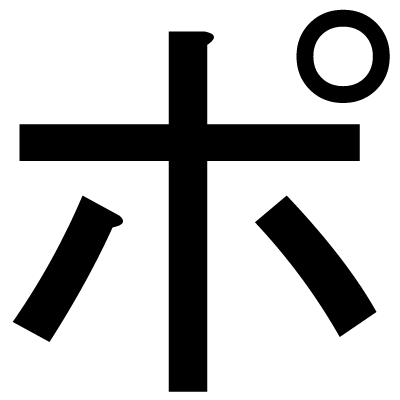
<style>
.page{position:relative;width:400px;height:400px;background:#ffffff}
.page>*{position:absolute;margin:0}
.t1{font:424.8px "MS-PGothic";color:#000000}
</style>
<div class="page">
<p class="t1" style="left:12px;top:9px;width:378px;height:383px">ポ</p>
</div>
